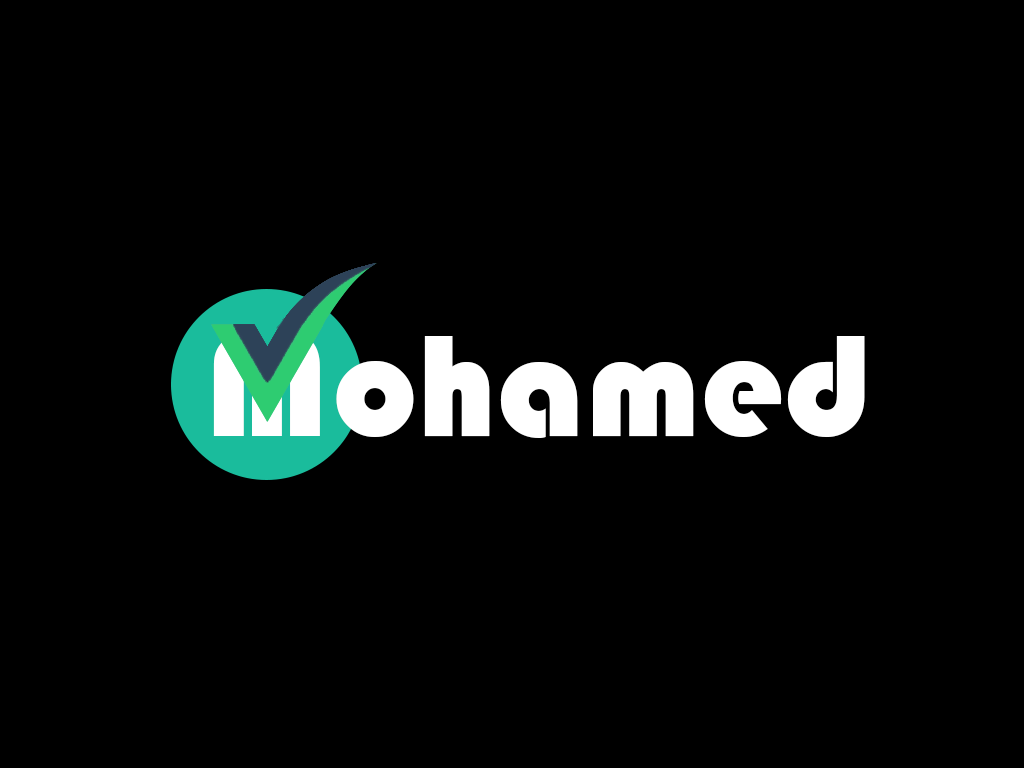
<style>
.page{position:relative;width:1024px;height:768px;background:#000000}
.page>*{position:absolute;margin:0}
.t1{font:150px "Bauhaus93"}
.t2{font:150px "Bauhaus93";color:#ffffff}
</style>
<div class="page">
<p class="t1" style="left:213px;top:334px;width:107px;height:102px">M</p>
<p class="t2" style="left:336px;top:336px;width:529px;height:102px">ohamed</p>
</div>
